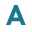
<style>
.page{position:relative;width:32px;height:32px;background:#ffffff}
.page>*{position:absolute;margin:0}
.t1{font:31.2px "TwCenMT-Bold";color:#1b7790}
</style>
<div class="page">
<p class="t1" style="left:6px;top:5px;width:20px;height:20px">A</p>
</div>
